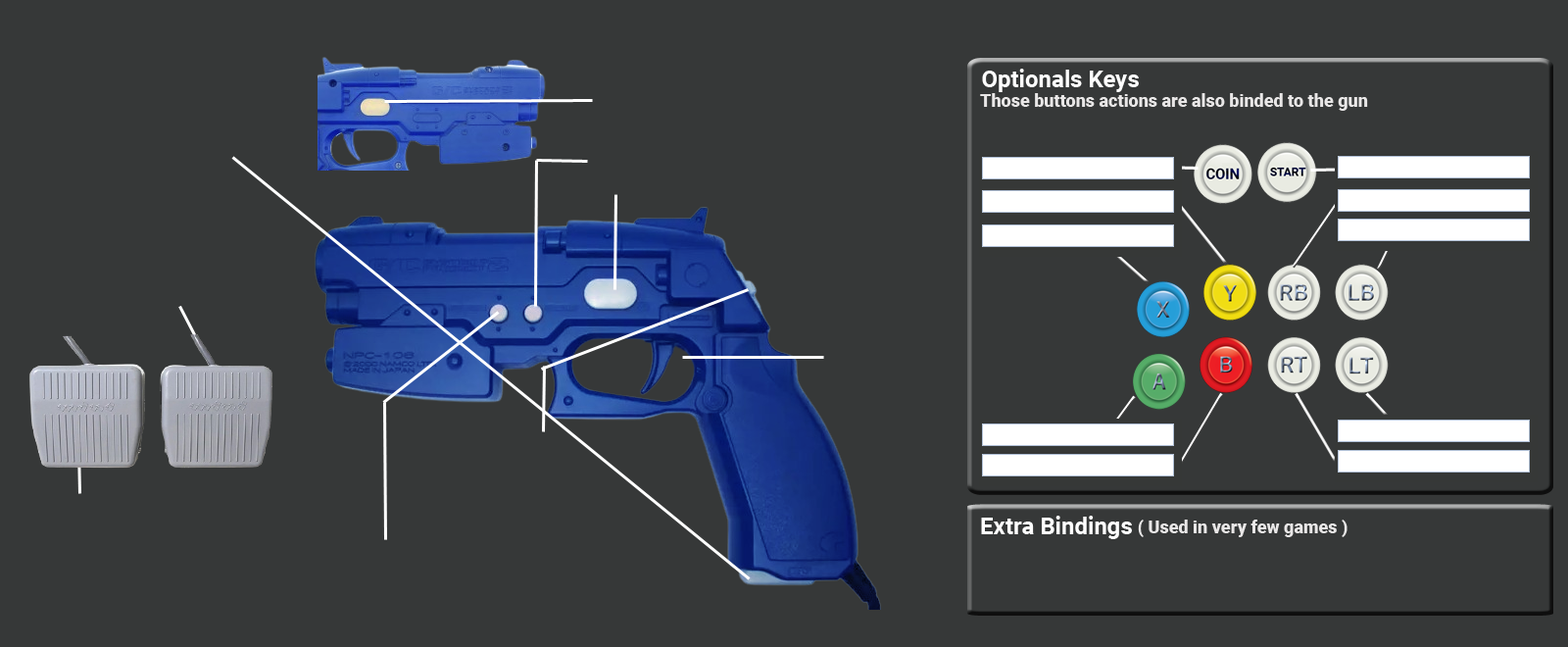
<style>
.page{position:relative;width:1568px;height:647px;background:#363838}
.page>*{position:absolute;margin:0}
.t1{font:23.5px "Roboto-Bold";color:#fefefe}
.t2{font:17.6px "Roboto-Black";color:#e9e7e7}
</style>
<div class="page">
<p class="t1" style="left:982px;top:69px;width:157px;height:23px">Optionals Keys</p>
<p class="t2" style="left:980px;top:93px;width:388px;height:18px">Those buttons actions are also binded to the gun</p>
<p class="t1" style="left:981px;top:515px;width:151px;height:24px">Extra Bindings</p>
<p class="t2" style="left:1138px;top:519px;width:210px;height:18px">( Used in very few games )</p>
</div>
